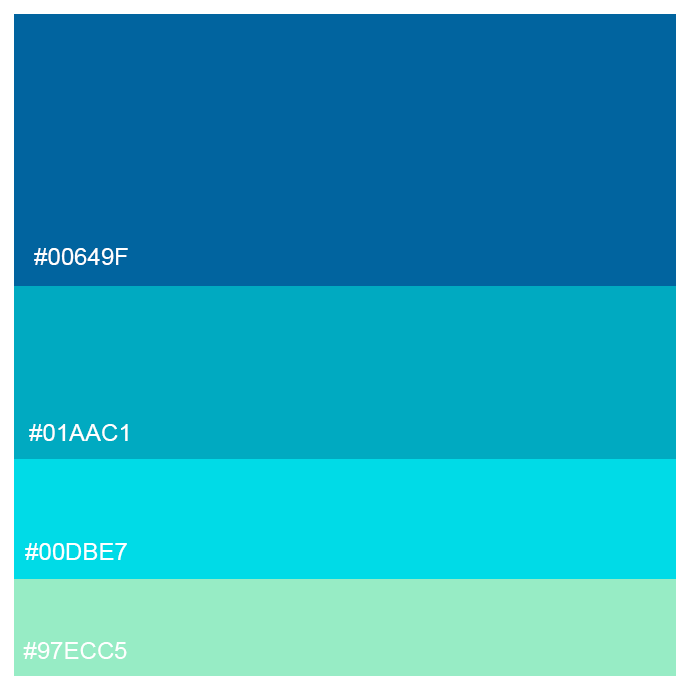
<style>
.page{position:relative;width:690px;height:690px;background:#01649f}
.page>*{position:absolute;margin:0}
.t1{font:24px "ArialMT";color:#ffffff}
</style>
<div class="page">
<p class="t1" style="left:34px;top:248px;width:94px;height:17px">#00649F</p>
<p class="t1" style="left:29px;top:424px;width:99px;height:17px">#01AAC1</p>
<p class="t1" style="left:25px;top:543px;width:102px;height:17px">#00DBE7</p>
<p class="t1" style="left:23px;top:642px;width:104px;height:17px">#97ECC5</p>
</div>
